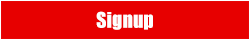
<style>
.page{position:relative;width:250px;height:40px;background:#e70000}
.page>*{position:absolute;margin:0}
.t1{font:20px "Impact";color:#fefffe}
</style>
<div class="page">
<p class="t1" style="left:96px;top:11px;width:57px;height:19px">Signup</p>
</div>
